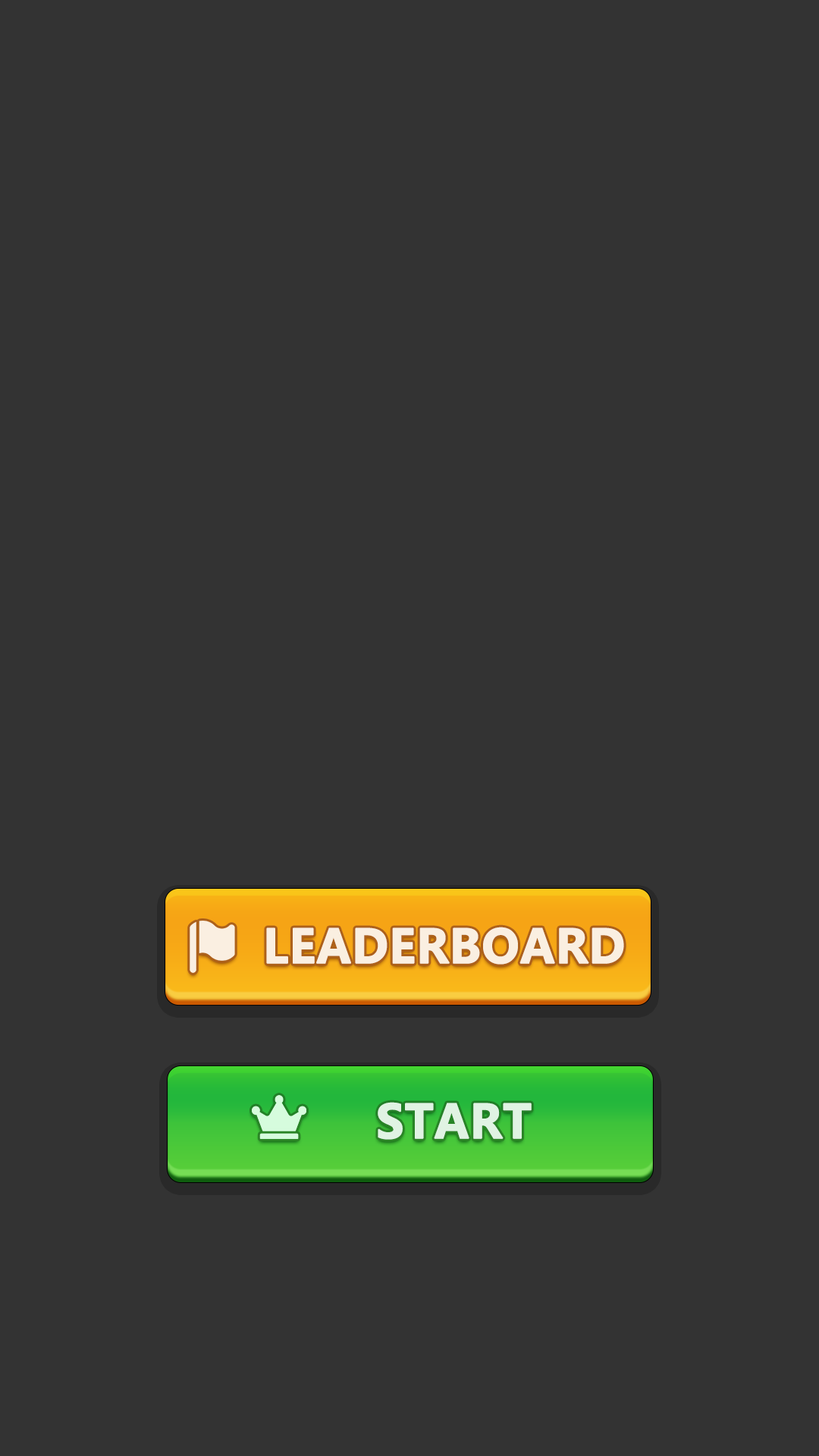
<style>
.page{position:relative;width:819px;height:1456px;background:#333333}
.page>*{position:absolute;margin:0}
.t1{font:45.5px "MicrosoftYaHei-Bold";color:#f9e5d3;text-transform:uppercase;font-weight:bold}
.t2{font:45.5px "MicrosoftYaHei-Bold";color:#e0f3e3;text-transform:uppercase;font-weight:bold}
</style>
<div class="page">
<p class="t1" style="left:266px;top:927px;width:358px;height:38px">LEADERBOARD</p>
<p class="t2" style="left:378px;top:1102px;width:154px;height:38px">start</p>
</div>
